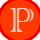
<style>
.page{position:relative;width:40px;height:40px;background:#ff3a00}
.page>*{position:absolute;margin:0}
.t1{font:47.2px "ColonnaMT";letter-spacing:0.26em;color:#f8c5b6;text-transform:uppercase}
</style>
<div class="page">
<p class="t1" style="left:10px;top:8px;width:24px;height:24px">P</p>
</div>
